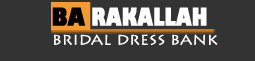
<style>
.page{position:relative;width:255px;height:61px;background:#333333}
.page>*{position:absolute;margin:0}
.t1{font:24.3px "GillSans-UltraBold";color:#ffffff;scale:0.67 1}
.t2{font:24.3px "GillSans-UltraBold";color:#040001;scale:0.74 1}
.t3{font:14px "LithosPro-Regular";color:#fffefe;scale:1.12 1}
</style>
<div class="page">
<p class="t1" style="left:52px;top:7px;width:155px;height:19px"><span class="t2">BA </span>RAKALLAH</p>
<p class="t3" style="left:54px;top:34px;width:164px;height:12px">BRIDAL DRESS BANK</p>
</div>
